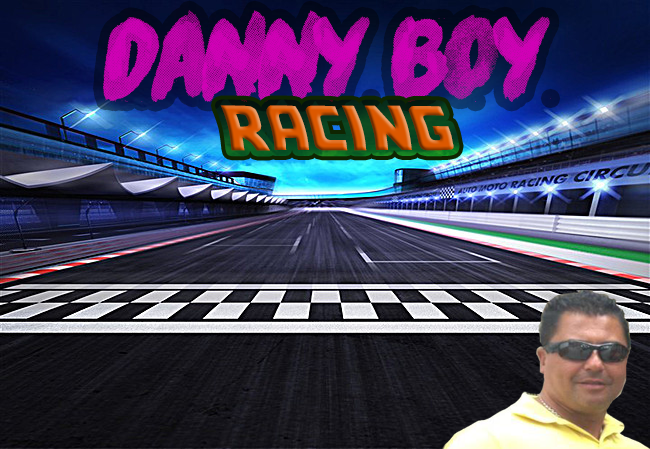
<style>
.page{position:relative;width:650px;height:449px}
.page>*{position:absolute;margin:0}
.t1{font:125px "RiverDrive";color:#d100b6}
.t2{font:50px "Backtothefuture2002-Regular"}
</style>
<div class="page">
<p class="t1" style="left:102px;top:10px;width:449px;height:92px">DANNY BOY</p>
<p class="t2" style="left:220px;top:105px;width:234px;height:46px">RACING</p>
</div>
